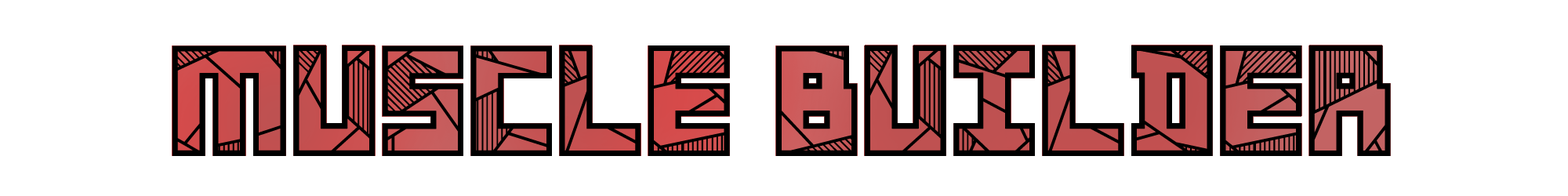
<style>
.page{position:relative;width:1568px;height:196px;background:#ffffff}
.page>*{position:absolute;margin:0}
.t1{font:156.8px "Basscrw";color:#000000}
</style>
<div class="page">
<p class="t1" style="left:172px;top:45px;width:1219px;height:111px">Muscle builder</p>
</div>
